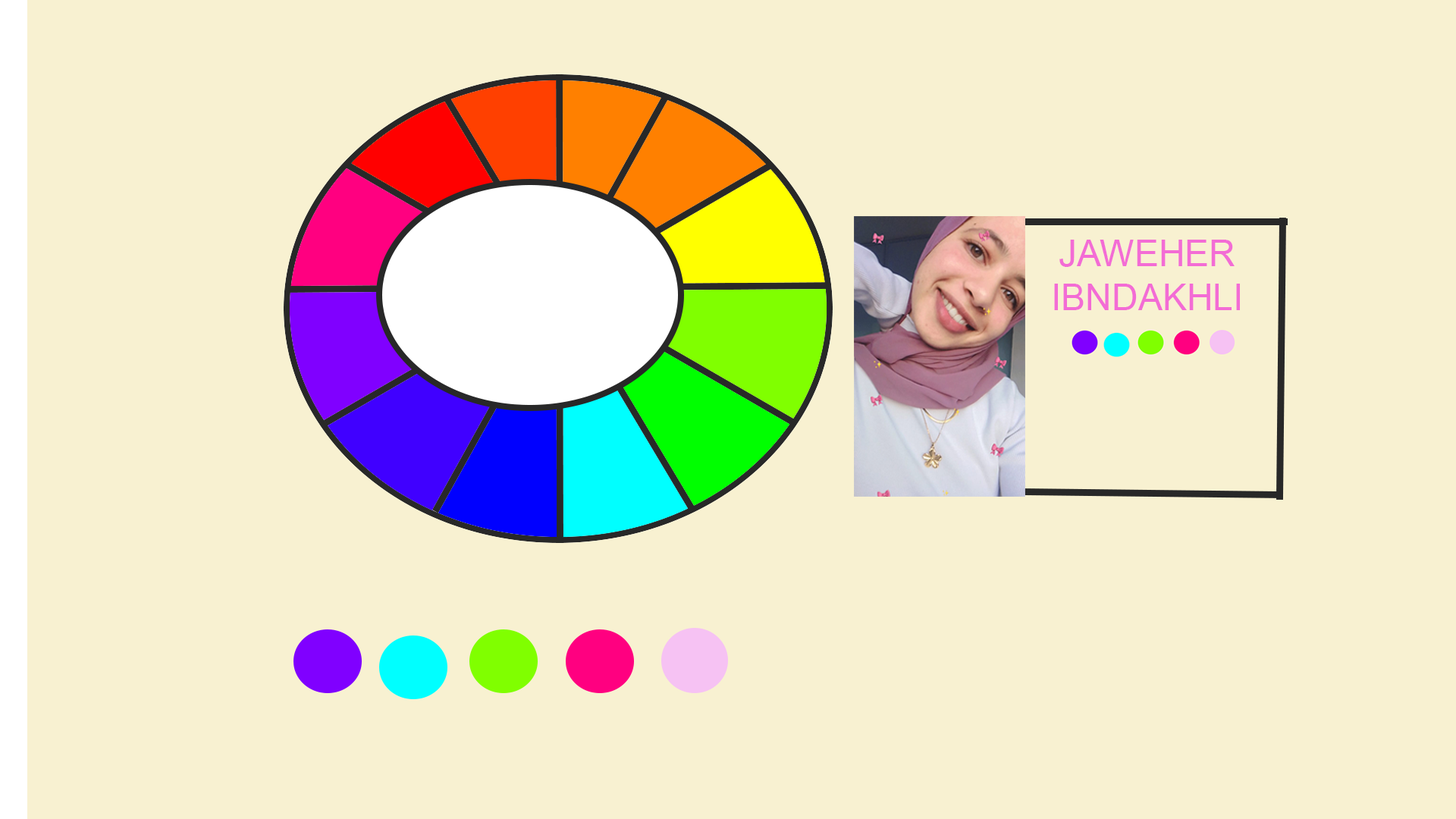
<style>
.page{position:relative;width:1456px;height:819px;background:#f8f1d1}
.page>*{position:absolute;margin:0}
.t1{font:36.4px "ArialMT";color:#f36cd5}
</style>
<div class="page">
<p class="t1" style="left:1054px;top:240px;width:186px;height:70px">JAWEHER IBNDAKHLI</p>
</div>
